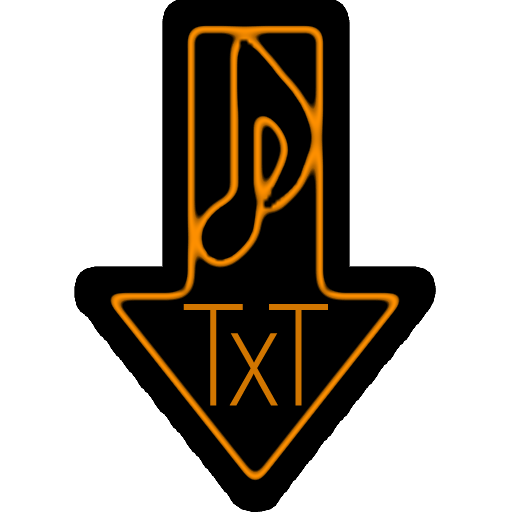
<style>
.page{position:relative;width:512px;height:512px;background:#ffffff}
.page>*{position:absolute;margin:0}
.t1{font:466.7px "AppleGothic";color:#0f0f0f;scale:0.8 1}
.t2{font:150.2px "MyriadPro-Light";letter-spacing:-0.06em;color:#d17600;scale:0.8 1}
</style>
<div class="page">
<p class="t1" style="left:94px;top:18px;width:322px;height:474px">⬇</p>
<p class="t2" style="left:183px;top:304px;width:145px;height:102px">TxT</p>
</div>
